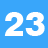
<style>
.page{position:relative;width:48px;height:48px;background:#39a6fa}
.page>*{position:absolute;margin:0}
.t1{font:35.1px "Swiss721BT-Heavy";color:#ffffff}
</style>
<div class="page">
<p class="t1" style="left:4px;top:12px;width:41px;height:24px">23</p>
</div>
